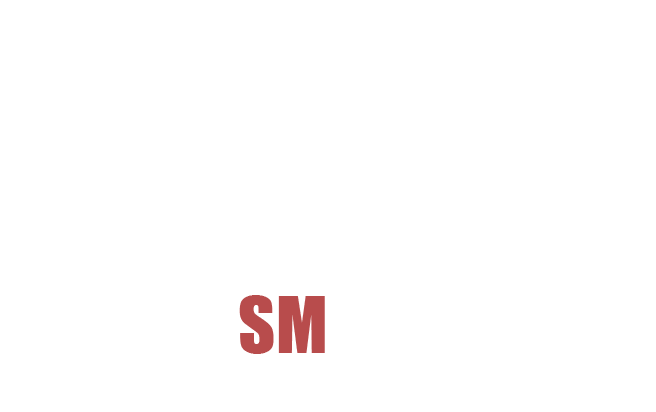
<style>
.page{position:relative;width:656px;height:412px;background:#ffffff}
.page>*{position:absolute;margin:0}
.t1{font:72px "Impact";color:#b84c4c}
</style>
<div class="page">
<p class="t1" style="left:239px;top:295px;width:86px;height:59px">SM</p>
</div>
